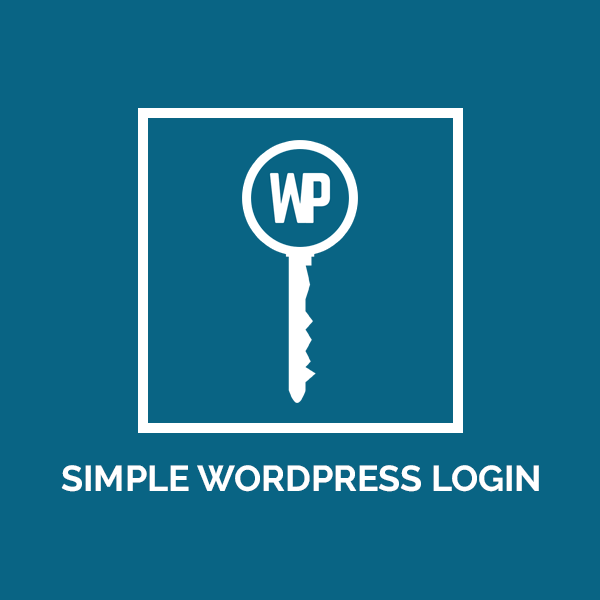
<style>
.page{position:relative;width:600px;height:600px;background:#096484}
.page>*{position:absolute;margin:0}
.t1{font:36px "Raleway-Bold";color:#ffffff}
</style>
<div class="page">
<p class="t1" style="left:61px;top:465px;width:478px;height:27px">SIMPLE WORDPRESS LOGIN</p>
</div>
